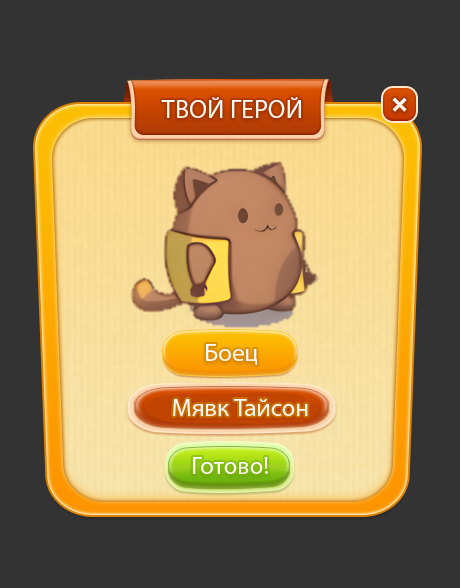
<style>
.page{position:relative;width:460px;height:588px;background:#333333}
.page>*{position:absolute;margin:0}
.t1{font:26px "MyriadPro-Regular";color:#ffffff}
.t2{font:25px "MyriadPro-Regular";color:#ffffff}
.t3{font:25px "MyriadPro-Regular";color:#fdf6e8}
</style>
<div class="page">
<p class="t1" style="left:161px;top:97px;width:140px;height:21px">ТВОЙ ГЕРОЙ</p>
<p class="t2" style="left:206px;top:344px;width:51px;height:21px">Боец</p>
<p class="t3" style="left:173px;top:399px;width:135px;height:17px">Мявк Тайсон</p>
<p class="t3" style="left:193px;top:457px;width:75px;height:17px">Готово!</p>
</div>
